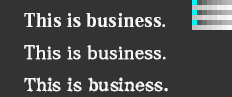
<style>
.page{position:relative;width:232px;height:97px;background:#333333}
.page>*{position:absolute;margin:0}
.t1{font:18px/32px "KozMinPro-Heavy";letter-spacing:0.022em;color:#f8f8f8}
.t2{font:18px/32px "AdobeFangsongStd-Regular";letter-spacing:0.028em;color:#f8f8f8;font-weight:bold}
.t3{font:18px/32px "ComicMysteryStd-DB";letter-spacing:-0.006em;color:#f8f8f8}
</style>
<div class="page">
<p class="t1" style="left:24px;top:13px;width:144px;height:79px">This is business.<br><span class="t2">This is business.<br></span><span class="t3">This is business.</span></p>
</div>
